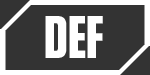
<style>
.page{position:relative;width:150px;height:75px;background:#333333}
.page>*{position:absolute;margin:0}
.t1{font:60px "Tungsten-Bold";color:#ffffff}
</style>
<div class="page">
<p class="t1" style="left:45px;top:16px;width:58px;height:42px">DEF</p>
</div>
